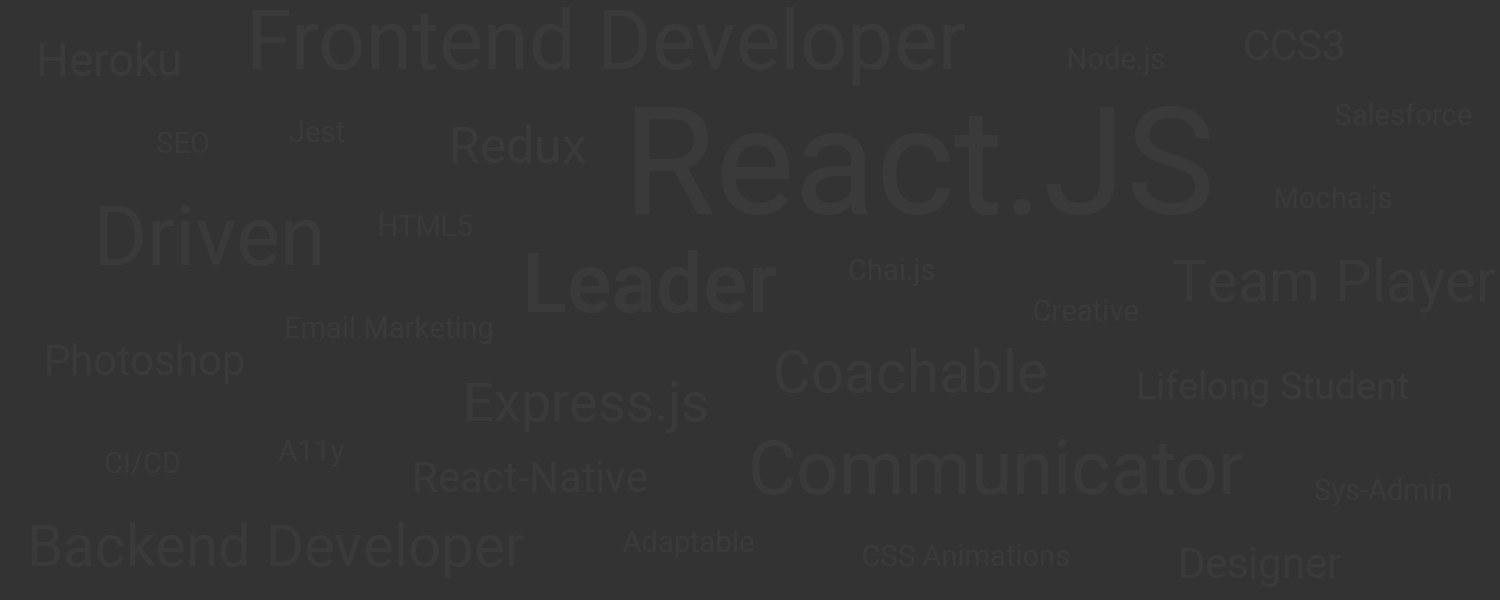
<style>
.page{position:relative;width:1500px;height:600px;background:#333333}
.page>*{position:absolute;margin:0}
.t1{font:83.3px "Roboto-Regular";color:#3a3a3a}
.t2{font:41.7px "Roboto-Regular";color:#3a3a3a}
.t3{font:45.8px "Roboto-Regular";color:#3a3a3a}
.t4{font:29.2px "Roboto-Regular";color:#3a3a3a}
.t5{font:150px "Roboto-Regular";color:#3a3a3a}
.t6{font:50px "Roboto-Regular";color:#3a3a3a}
.t7{font:83.3px "Roboto-Medium";color:#3a3a3a}
.t8{font:58.3px "Roboto-Regular";color:#3a3a3a}
.t9{font:37.5px "Roboto-Regular";color:#3a3a3a}
.t10{font:54.2px "Roboto-Regular";color:#3a3a3a}
.t11{font:75px "Roboto-Regular";color:#3a3a3a}
</style>
<div class="page">
<p class="t1" style="left:252px;top:7px;width:713px;height:79px">Frontend Developer</p>
<p class="t2" style="left:1245px;top:30px;width:98px;height:30px">CCS3</p>
<p class="t3" style="left:39px;top:41px;width:141px;height:35px">Heroku</p>
<p class="t4" style="left:1068px;top:47px;width:96px;height:28px">Node.js</p>
<p class="t5" style="left:635px;top:106px;width:575px;height:109px">React.JS</p>
<p class="t4" style="left:1335px;top:103px;width:137px;height:22px">Salesforce</p>
<p class="t4" style="left:289px;top:121px;width:55px;height:21px">Jest</p>
<p class="t6" style="left:453px;top:125px;width:133px;height:38px">Redux</p>
<p class="t4" style="left:157px;top:132px;width:52px;height:21px">SEO</p>
<p class="t4" style="left:1275px;top:186px;width:116px;height:28px">Mocha.js</p>
<p class="t1" style="left:99px;top:205px;width:222px;height:61px">Driven</p>
<p class="t4" style="left:379px;top:215px;width:93px;height:21px">HTML5</p>
<p class="t7" style="left:528px;top:250px;width:248px;height:63px">Leader</p>
<p class="t8" style="left:1173px;top:257px;width:322px;height:56px">Team Player</p>
<p class="t4" style="left:849px;top:258px;width:85px;height:28px">Chai.js</p>
<p class="t4" style="left:1034px;top:299px;width:104px;height:22px">Creative</p>
<p class="t4" style="left:286px;top:316px;width:206px;height:28px">Email Marketing</p>
<p class="t2" style="left:47px;top:343px;width:197px;height:41px">Photoshop</p>
<p class="t8" style="left:776px;top:348px;width:270px;height:45px">Coachable</p>
<p class="t9" style="left:1139px;top:370px;width:270px;height:37px">Lifelong Student</p>
<p class="t10" style="left:467px;top:381px;width:240px;height:52px">Express.js</p>
<p class="t4" style="left:278px;top:440px;width:66px;height:27px">A11y</p>
<p class="t11" style="left:752px;top:439px;width:491px;height:56px">Communicator</p>
<p class="t4" style="left:105px;top:452px;width:75px;height:23px">CI/CD</p>
<p class="t2" style="left:415px;top:461px;width:232px;height:31px">React-Native</p>
<p class="t4" style="left:1315px;top:478px;width:136px;height:28px">Sys-Admin</p>
<p class="t8" style="left:31px;top:522px;width:493px;height:56px">Backend Developer</p>
<p class="t4" style="left:622px;top:530px;width:132px;height:28px">Adaptable</p>
<p class="t4" style="left:863px;top:544px;width:206px;height:22px">CSS Animations</p>
<p class="t2" style="left:1181px;top:547px;width:160px;height:40px">Designer</p>
</div>
